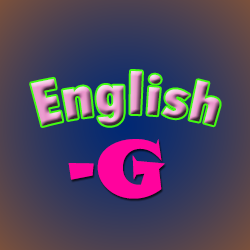
<style>
.page{position:relative;width:250px;height:250px}
.page>*{position:absolute;margin:0}
.t1{font:62px "TwCenMT-CondensedExtraBold"}
.t2{font:79px "SnapITC-Regular";color:#ff039d}
</style>
<div class="page">
<p class="t1" style="left:31px;top:71px;width:189px;height:55px;rotate:1deg">English</p>
<p class="t2" style="left:68px;top:139px;width:97px;height:60px">-G</p>
</div>
